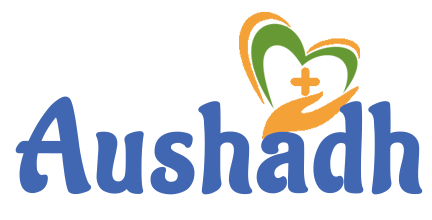
<style>
.page{position:relative;width:432px;height:220px;background:#ffffff}
.page>*{position:absolute;margin:0}
.t1{font:125px "Aladin-Regular";letter-spacing:0.02em;color:#4267b2;font-weight:bold}
</style>
<div class="page">
<p class="t1" style="left:15px;top:96px;width:408px;height:99px">Aushadh</p>
</div>
